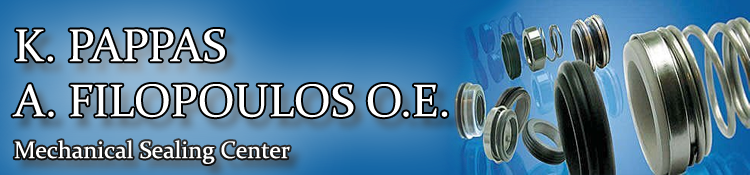
<style>
.page{position:relative;width:750px;height:175px}
.page>*{position:absolute;margin:0}
.t1{font:46px "Constantia";color:#ffffff}
.t2{font:24px "Constantia";color:#ffffff}
</style>
<div class="page">
<p class="t1" style="left:12px;top:29px;width:436px;height:89px">K. PAPPAS  <br>A. FILOPOULOS O.E.</p>
<p class="t2" style="left:14px;top:140px;width:276px;height:24px">Mechanical Sealing Center</p>
</div>
